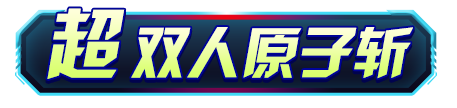
<style>
.page{position:relative;width:457px;height:108px;background:#ffffff}
.page>*{position:absolute;margin:0}
.t1{font:76px "HYk2gj";font-style:italic}
.t2{font:55px "HYk2gj";font-style:italic}
</style>
<div class="page">
<p class="t1" style="left:47px;top:8px;width:78px;height:71px">超</p>
<p class="t2" style="left:131px;top:27px;width:282px;height:52px">双人原子斩</p>
</div>
